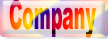
<style>
.page{position:relative;width:108px;height:39px}
.page>*{position:absolute;margin:0}
.t1{font:40px "Arial-Black";scale:0.43 1}
</style>
<div class="page">
<p class="t1" style="left:9px;top:0px;width:87px;height:38px">Company</p>
</div>
